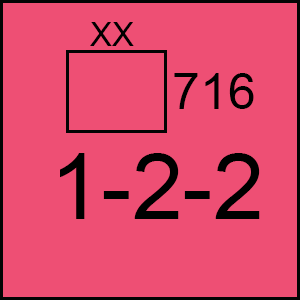
<style>
.page{position:relative;width:300px;height:300px;background:#ee4f74}
.page>*{position:absolute;margin:0}
.t1{font:33.3px "ArialMT";color:#000000}
.t2{font:50px "ArialMT";color:#000000}
.t3{font:91.7px "ArialMT";color:#000000}
</style>
<div class="page">
<p class="t1" style="left:90px;top:22px;width:44px;height:24px">XX</p>
<p class="t2" style="left:174px;top:73px;width:80px;height:36px">716</p>
<p class="t3" style="left:60px;top:153px;width:200px;height:66px">1-2-2</p>
</div>
